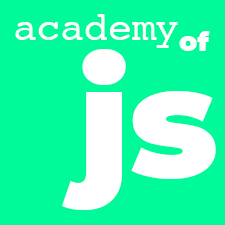
<style>
.page{position:relative;width:225px;height:225px;background:#00fa9a}
.page>*{position:absolute;margin:0}
.t1{font:39.5px "Courier";color:#ffffff}
.t2{font:27px "Montserrat-Black";color:#ffffff}
.t3{font:158.4px "Montserrat-Black";color:#ffffff}
</style>
<div class="page">
<p class="t1" style="left:15px;top:14px;width:163px;height:34px">academy</p>
<p class="t2" style="left:179px;top:31px;width:31px;height:20px">of</p>
<p class="t3" style="left:62px;top:49px;width:154px;height:161px">js</p>
</div>
